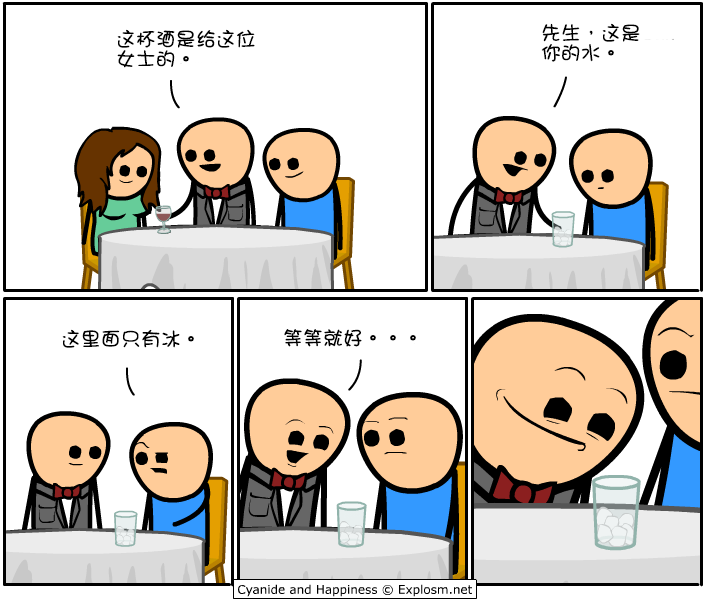
<style>
.page{position:relative;width:708px;height:604px;background:#ffffff}
.page>*{position:absolute;margin:0}
.t1{font:20px/20px "DFGirl";color:#000000}
.t2{font:20px "DFGirl";color:#000000}
</style>
<div class="page">
<p class="t1" style="left:117px;top:29px;width:138px;height:39px">这杯酒是给这位<br>女士的。</p>
<p class="t1" style="left:541px;top:23px;width:99px;height:39px">先生，这是<br>你的水。</p>
<p class="t2" style="left:62px;top:329px;width:132px;height:19px">这里面只有冰。</p>
<p class="t2" style="left:284px;top:329px;width:132px;height:18px">等等就好。。。</p>
</div>
